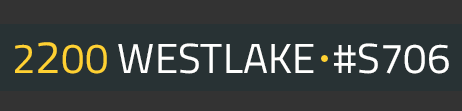
<style>
.page{position:relative;width:462px;height:111px;background:#283234}
.page>*{position:absolute;margin:0}
.t1{font:42px "TitilliumWeb-Regular";color:#fffffe}
.t2{font:42px "TitilliumWeb-Regular";color:#ffd132}
.t3{font:46px "TitilliumWeb-Regular";color:#ffd132}
.t4{font:42px "TitilliumWeb-Regular";color:#fffffe;font-variant:small-caps}
</style>
<div class="page">
<p class="t1" style="left:15px;top:42px;width:434px;height:32px"><span class="t2">2</span><span class="t3">2</span><span class="t2">00 </span><span class="t4">W</span>ESTLAKE  #S706</p>
</div>
